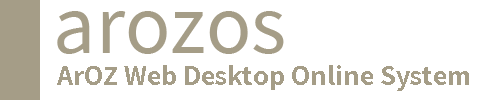
<style>
.page{position:relative;width:500px;height:100px;background:#ffffff}
.page>*{position:absolute;margin:0}
.t1{font:75px "TaipeiSansTCBeta-Regular";color:#a59d87}
.t2{font:25px "TaipeiSansTCBeta-Bold";color:#a59d87}
</style>
<div class="page">
<p class="t1" style="left:57px;top:11px;width:227px;height:43px">arozos</p>
<p class="t2" style="left:57px;top:65px;width:412px;height:26px">ArOZ Web Desktop Online System</p>
</div>
